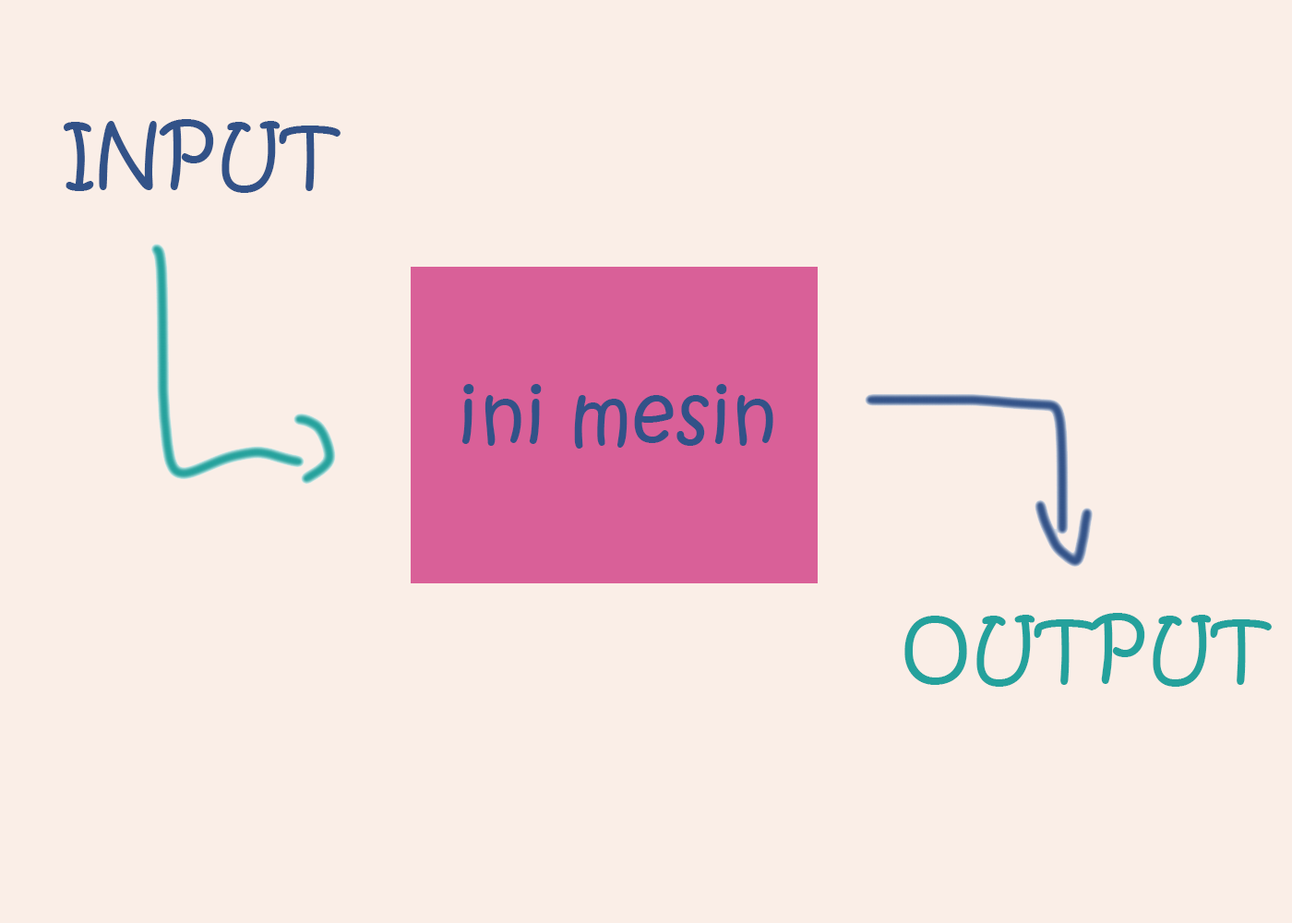
<style>
.page{position:relative;width:1292px;height:923px;background:#faeee7}
.page>*{position:absolute;margin:0}
.t1{font:76.9px "KristenITC-Regular";color:#325288}
.t2{font:76.9px "KristenITC-Regular";color:#24a19c}
</style>
<div class="page">
<p class="t1" style="left:64px;top:119px;width:277px;height:74px">INPUT</p>
<p class="t1" style="left:461px;top:384px;width:312px;height:65px">ini mesin</p>
<p class="t2" style="left:904px;top:613px;width:368px;height:74px">OUTPUT</p>
</div>
